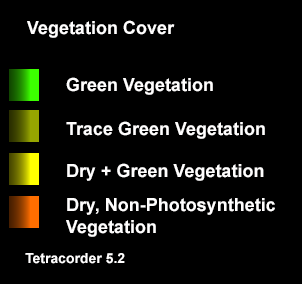
<style>
.page{position:relative;width:302px;height:284px;background:#000000}
.page>*{position:absolute;margin:0}
.t1{font:18px "Arial-BoldMT";color:#fffefe}
.t2{font:14px "Arial-BoldMT";color:#fffefe}
</style>
<div class="page">
<p class="t1" style="left:27px;top:20px;width:148px;height:18px">Vegetation Cover</p>
<p class="t1" style="left:66px;top:77px;width:147px;height:18px">Green Vegetation</p>
<p class="t1" style="left:66px;top:121px;width:199px;height:18px">Trace Green Vegetation</p>
<p class="t1" style="left:67px;top:163px;width:197px;height:18px">Dry + Green Vegetation</p>
<p class="t1" style="left:66px;top:198px;width:209px;height:39px">Dry, Non-Photosynthetic<br>Vegetation</p>
<p class="t2" style="left:25px;top:253px;width:100px;height:11px">Tetracorder 5.2</p>
</div>
